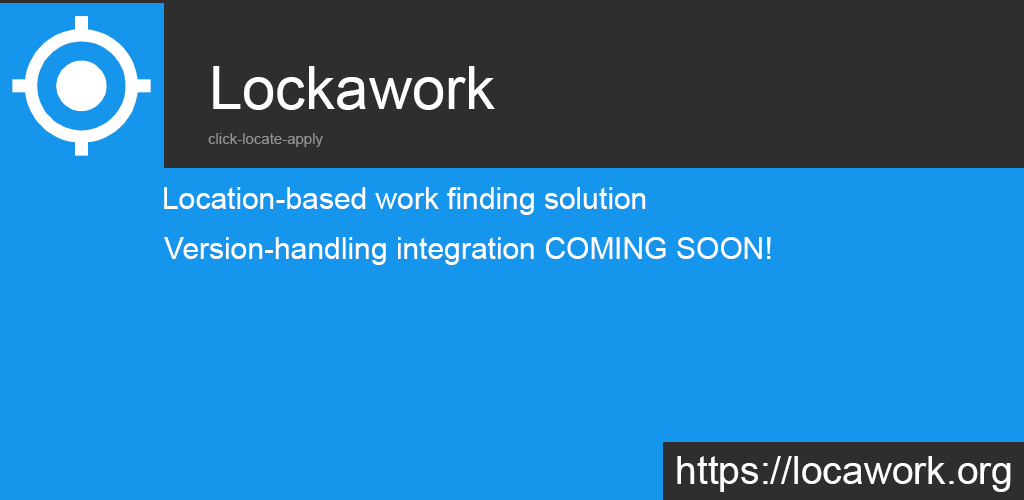
<style>
.page{position:relative;width:1024px;height:500px;background:#1595eb}
.page>*{position:absolute;margin:0}
.t1{font:60px "ArialMT";color:#fefefe}
.t2{font:15px "ArialMT";color:#929292}
.t3{font:30px "ArialMT";color:#ffffff}
.t4{font:39px "ArialMT";color:#fefefe}
</style>
<div class="page">
<p class="t1" style="left:213px;top:66px;width:282px;height:44px">Lockawork</p>
<p class="t2" style="left:208px;top:133px;width:115px;height:14px">click-locate-apply</p>
<p class="t3" style="left:164px;top:187px;width:482px;height:28px">Location-based work finding solution</p>
<p class="t3" style="left:164px;top:237px;width:607px;height:28px">Version-handling integration COMING SOON!</p>
<p class="t4" style="left:677px;top:456px;width:334px;height:36px">https://locawork.org</p>
</div>
